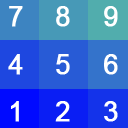
<style>
.page{position:relative;width:128px;height:128px}
.page>*{position:absolute;margin:0}
.t1{font:26.9px "ArialMT";letter-spacing:0.07em;color:#ffffff;font-weight:bold}
</style>
<div class="page">
<p class="t1" style="left:9px;top:6px;width:14px;height:21px">7</p>
<p class="t1" style="left:56px;top:6px;width:14px;height:21px">8</p>
<p class="t1" style="left:104px;top:6px;width:14px;height:21px">9</p>
<p class="t1" style="left:8px;top:54px;width:15px;height:21px">4</p>
<p class="t1" style="left:56px;top:54px;width:14px;height:21px">5</p>
<p class="t1" style="left:104px;top:54px;width:14px;height:21px">6</p>
<p class="t1" style="left:11px;top:101px;width:8px;height:21px">1</p>
<p class="t1" style="left:55px;top:101px;width:15px;height:21px">2</p>
<p class="t1" style="left:104px;top:101px;width:14px;height:21px">3</p>
</div>
